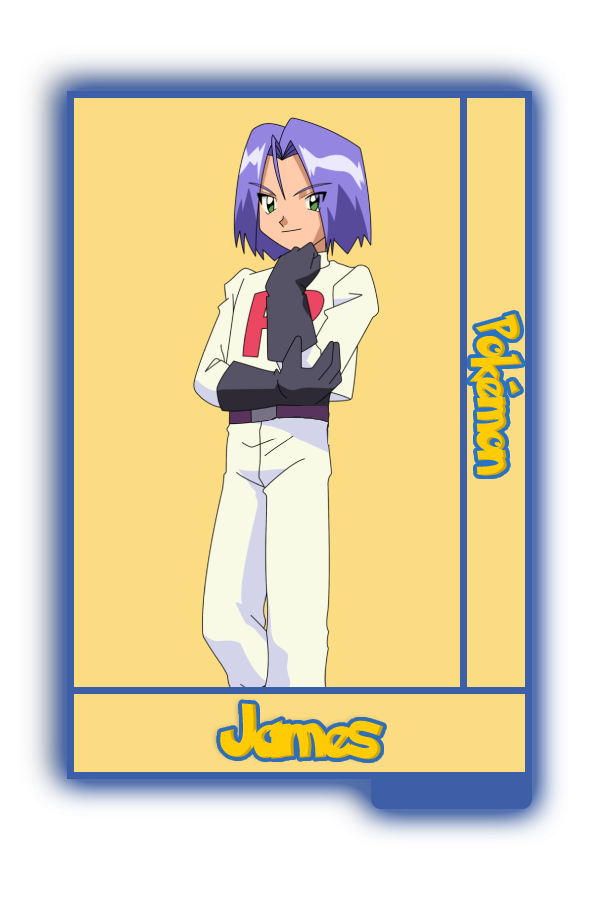
<style>
.page{position:relative;width:600px;height:900px;background:#fbdc83}
.page>*{position:absolute;margin:0}
.t1{font:48.8px "PokemonSolidNormal";color:#ffcb05;scale:0.8 1}
.t2{font:56.6px "PokemonSolidNormal";color:#ffcb05;scale:0.92 1}
</style>
<div class="page">
<p class="t1" style="left:469px;top:313px;width:54px;height:163px;rotate:90deg">Pokémon</p>
<p class="t2" style="left:220px;top:703px;width:164px;height:57px">James</p>
</div>
